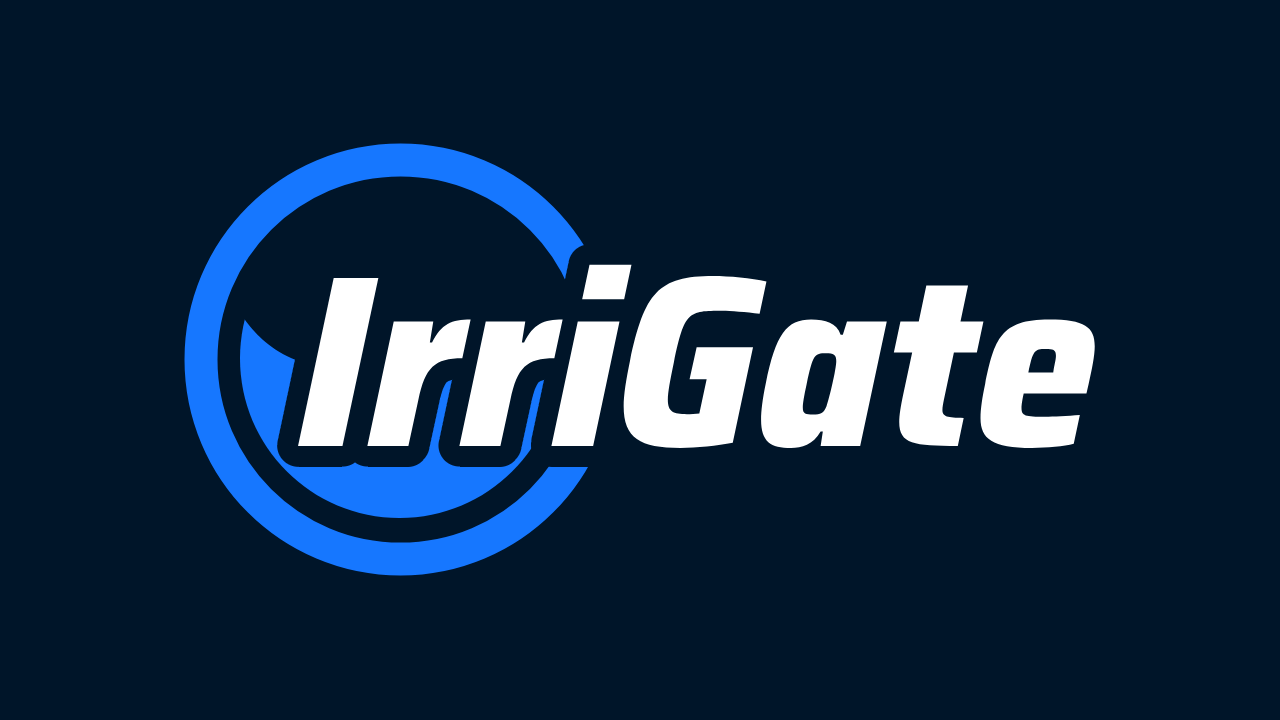
<style>
.page{position:relative;width:1280px;height:720px;background:#001529}
.page>*{position:absolute;margin:0}
.t1{font:244.1px "SairaSemiCondensed-ExtraBoldItalic";color:#ffffff}
</style>
<div class="page">
<p class="t1" style="left:298px;top:264px;width:797px;height:184px">IrriGate</p>
</div>
